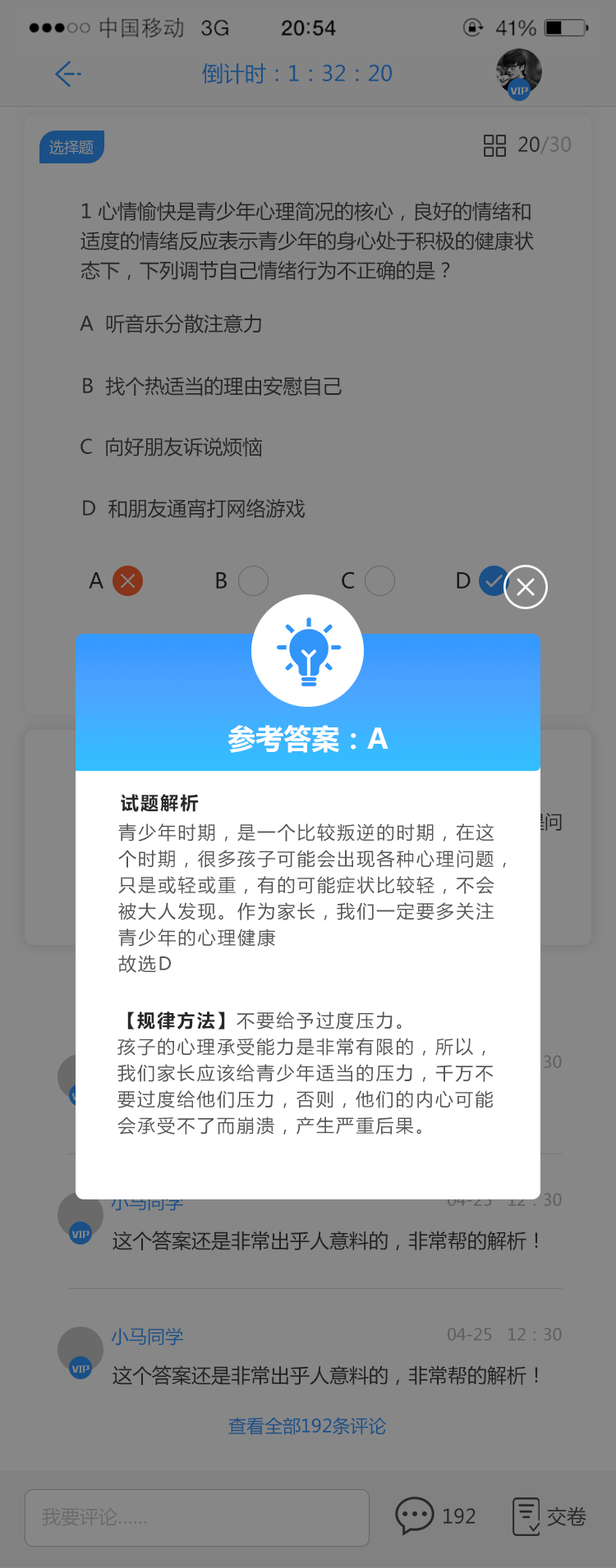
<style>
.page{position:relative;width:616px;height:1568px;background:#878787}
.page>*{position:absolute;margin:0}
.t1{font:21.3px "MicrosoftYaHei";color:#1a5087}
.t2{font:7.6px "MFLiHei_Noncommercial-Regular";color:#878787}
.t3{font:19.7px "MicrosoftYaHei"}
.t4{font:14.8px "MicrosoftYaHei";color:#878787}
.t5{font:19.7px/29.6px "MicrosoftYaHei";color:#282727}
.t6{font:19.7px "MicrosoftYaHei";color:#282727}
.t7{font:21.3px "MicrosoftYaHei";color:#2e2e2e}
.t8{font:27.9px "MicrosoftYaHei-Bold";color:#fefefe}
.t9{font:18.1px "MicrosoftYaHei-Bold";letter-spacing:0.1em;color:#292929}
.t10{font:18.1px/26.3px "MicrosoftYaHei";letter-spacing:0.1em;color:#565656}
.t11{font:18.1px/26.3px "MicrosoftYaHei-Bold";letter-spacing:0.1em;color:#292929}
.t12{font:19.7px "MicrosoftYaHei";color:#212121}
.t13{font:18.1px "MicrosoftYaHei";color:#1a5087}
.t14{font:16.4px "MicrosoftYaHei";color:#5e5e5e}
.t15{font:18.9px "MicrosoftYaHei";color:#6b6b6b}
.t16{font:19.7px "MicrosoftYaHei";color:#292929}
</style>
<div class="page">
<p class="t1" style="left:202px;top:63px;width:190px;height:22px">倒计时：1：32：20</p>
<p class="t2" style="left:510px;top:87px;width:18px;height:7px">VIP</p>
<p class="t3" style="left:518px;top:136px;width:53px;height:18px">20/30</p>
<p class="t4" style="left:49px;top:140px;width:45px;height:14px">选择题</p>
<p class="t5" style="left:80px;top:201px;width:454px;height:80px">1 心情愉快是青少年心理简况的核心，良好的情绪和<br>适度的情绪反应表示青少年的身心处于积极的健康状<br>态下，下列调节自己情绪行为不正确的是？</p>
<p class="t6" style="left:80px;top:314px;width:181px;height:20px">A  听音乐分散注意力</p>
<p class="t6" style="left:83px;top:376px;width:259px;height:21px">B  找个热适当的理由安慰自己</p>
<p class="t6" style="left:80px;top:437px;width:182px;height:20px">C  向好朋友诉说烦恼</p>
<p class="t6" style="left:83px;top:498px;width:222px;height:20px">D  和朋友通宵打网络游戏</p>
<p class="t7" style="left:89px;top:572px;width:14px;height:17px">A</p>
<p class="t7" style="left:216px;top:572px;width:11px;height:17px">B</p>
<p class="t7" style="left:342px;top:571px;width:12px;height:18px">C</p>
<p class="t7" style="left:456px;top:572px;width:14px;height:17px">D</p>
<p class="t8" style="left:227px;top:725px;width:161px;height:28px">参考答案：A</p>
<p class="t9" style="left:121px;top:794px;width:78px;height:18px">试题解析</p>
<p class="t10" style="left:118px;top:823px;width:388px;height:150px">青少年时期，是一个比较叛逆的时期，在这<br>个时期，很多孩子可能会出现各种心理问题，<br>只是或轻或重，有的可能症状比较轻，不会<br>被大人发现。作为家长，我们一定要多关注<br>青少年的心理健康<br>故选D</p>
<p class="t10" style="left:117px;top:1011px;width:376px;height:124px"><span class="t11">【规律方法】</span>不要给予过度压力。<br>孩子的心理承受能力是非常有限的，所以，<br>我们家长应该给青少年适当的压力，千万不<br>要过度给他们压力，否则，他们的内心可能<br>会承受不了而崩溃，产生严重后果。</p>
<p class="t2" style="left:71px;top:1231px;width:18px;height:7px">VIP</p>
<p class="t12" style="left:112px;top:1231px;width:426px;height:20px">这个答案还是非常出乎人意料的，非常帮的解析！</p>
<p class="t13" style="left:111px;top:1327px;width:72px;height:19px">小马同学</p>
<p class="t14" style="left:447px;top:1327px;width:115px;height:14px">04-25   12：30</p>
<p class="t2" style="left:71px;top:1365px;width:18px;height:8px">VIP</p>
<p class="t12" style="left:112px;top:1365px;width:426px;height:21px">这个答案还是非常出乎人意料的，非常帮的解析！</p>
<p class="t13" style="left:228px;top:1417px;width:159px;height:18px">查看全部192条评论</p>
<p class="t15" style="left:42px;top:1507px;width:105px;height:19px">我要评论……</p>
<p class="t16" style="left:443px;top:1508px;width:32px;height:16px">192</p>
<p class="t16" style="left:547px;top:1506px;width:39px;height:20px">交卷</p>
</div>
